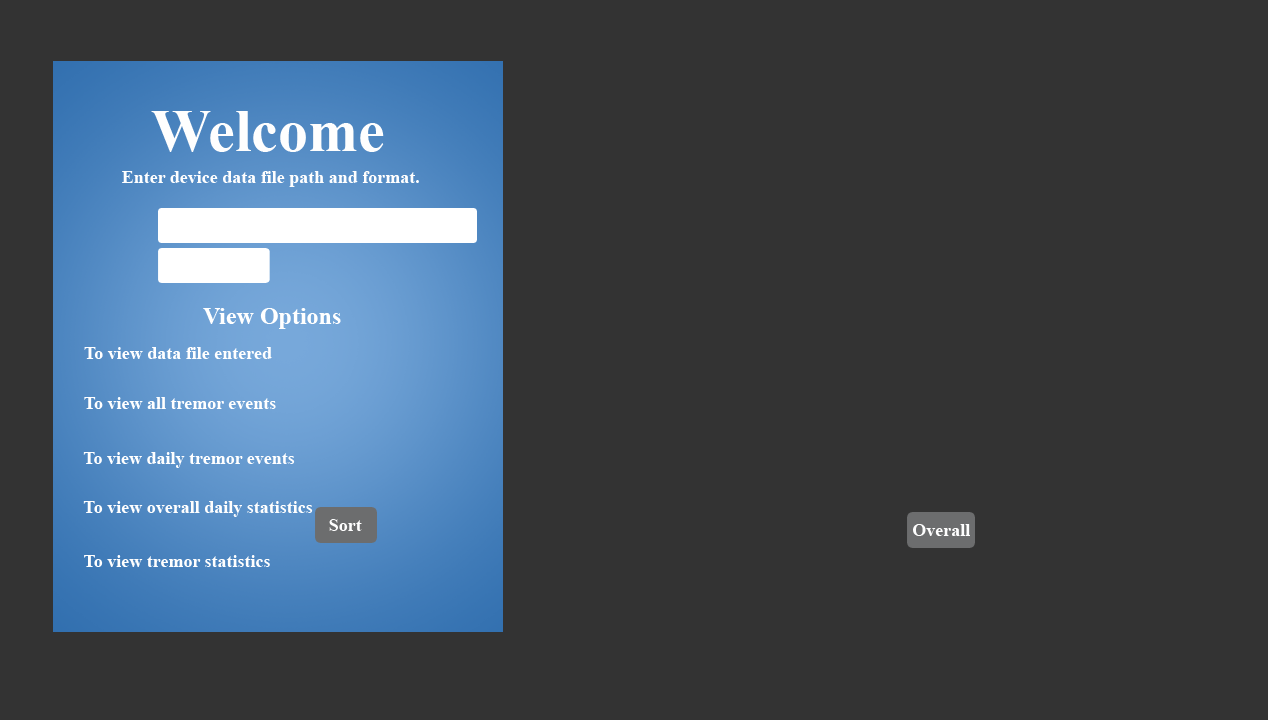
<style>
.page{position:relative;width:1268px;height:720px;background:#333333}
.page>*{position:absolute;margin:0}
.t1{font:60px "TimesNewRomanPS-BoldMT";color:#fefefe}
.t2{font:18px "TimesNewRomanPS-BoldMT";color:#fefefe}
.t3{font:24px "TimesNewRomanPS-BoldMT";color:#ffffff}
.t4{font:18px "TimesNewRomanPS-BoldMT";color:#ffffff}
</style>
<div class="page">
<p class="t1" style="left:151px;top:111px;width:233px;height:41px">Welcome</p>
<p class="t2" style="left:122px;top:171px;width:297px;height:16px">Enter device data file path and format.</p>
<p class="t3" style="left:203px;top:308px;width:138px;height:21px">View Options</p>
<p class="t4" style="left:84px;top:347px;width:188px;height:12px">To view data file entered</p>
<p class="t4" style="left:84px;top:397px;width:192px;height:12px">To view all tremor events</p>
<p class="t4" style="left:83px;top:452px;width:212px;height:16px">To view daily tremor events</p>
<p class="t2" style="left:83px;top:501px;width:230px;height:16px">To view overall daily statistics</p>
<p class="t2" style="left:329px;top:519px;width:33px;height:12px">Sort</p>
<p class="t2" style="left:913px;top:524px;width:57px;height:12px">Overall</p>
<p class="t2" style="left:84px;top:555px;width:186px;height:12px">To view tremor statistics</p>
</div>
